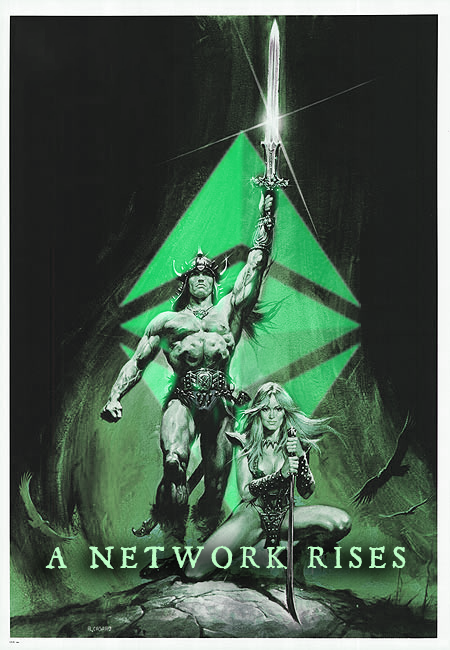
<style>
.page{position:relative;width:450px;height:650px}
.page>*{position:absolute;margin:0}
.t1{font:33px "JSL-Ancient";letter-spacing:0.2em;color:#bbfbc5;scale:0.93 1}
</style>
<div class="page">
<p class="t1" style="left:45px;top:545px;width:361px;height:24px">A NETWORK RISES</p>
</div>
